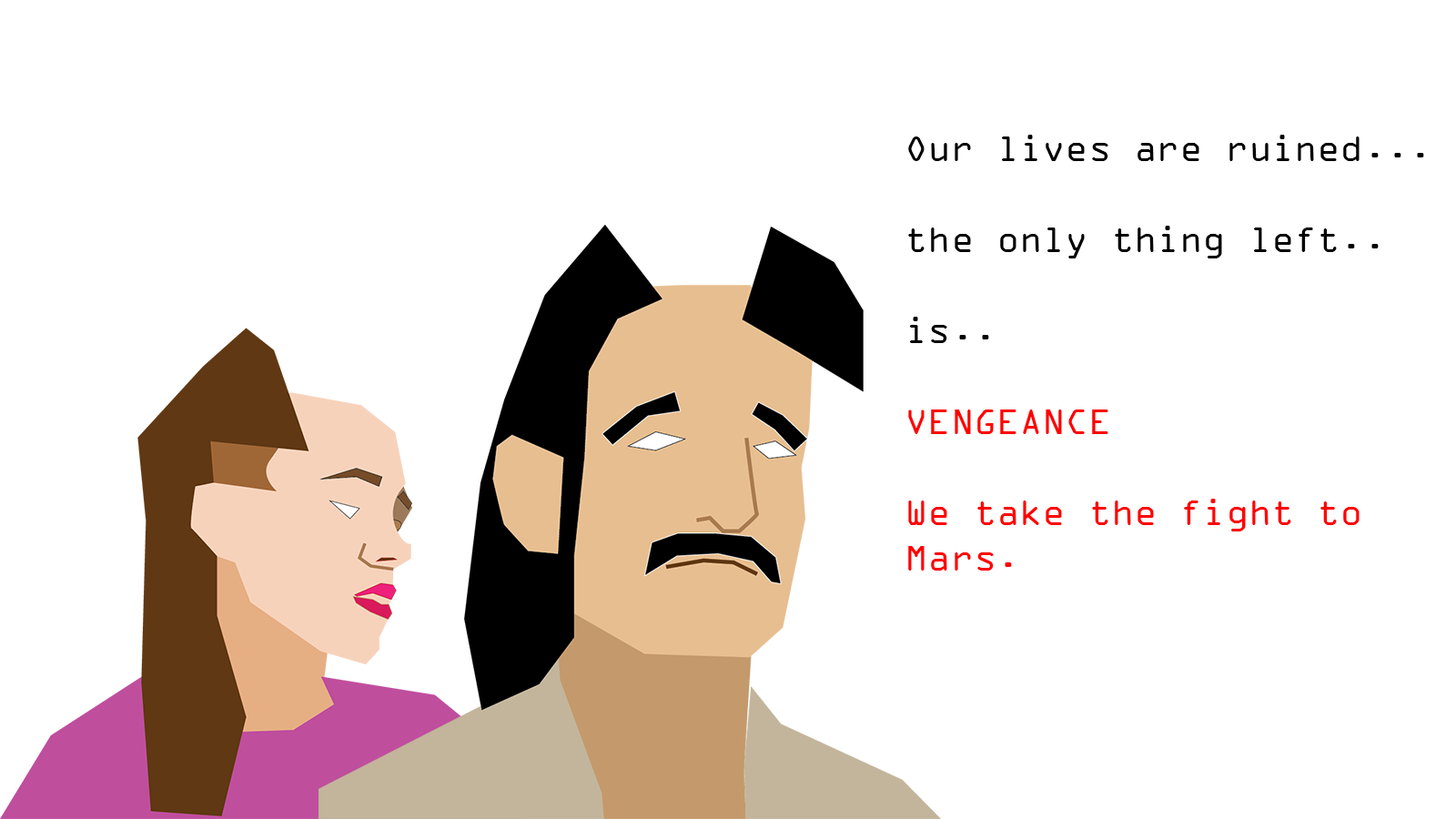
<style>
.page{position:relative;width:1456px;height:819px;background:#ffffff}
.page>*{position:absolute;margin:0}
.t1{font:37.9px "OCRAExtended";color:#000000}
.t2{font:37.9px "OCRAExtended";color:#ff0000}
</style>
<div class="page">
<p class="t1" style="left:908px;top:135px;width:516px;height:436px">Our lives are ruined... <br><br>the only thing left.. <br><br>is..<br><br><span class="t2">VENGEANCE<br><br>We take the fight to Mars.</span></p>
</div>
